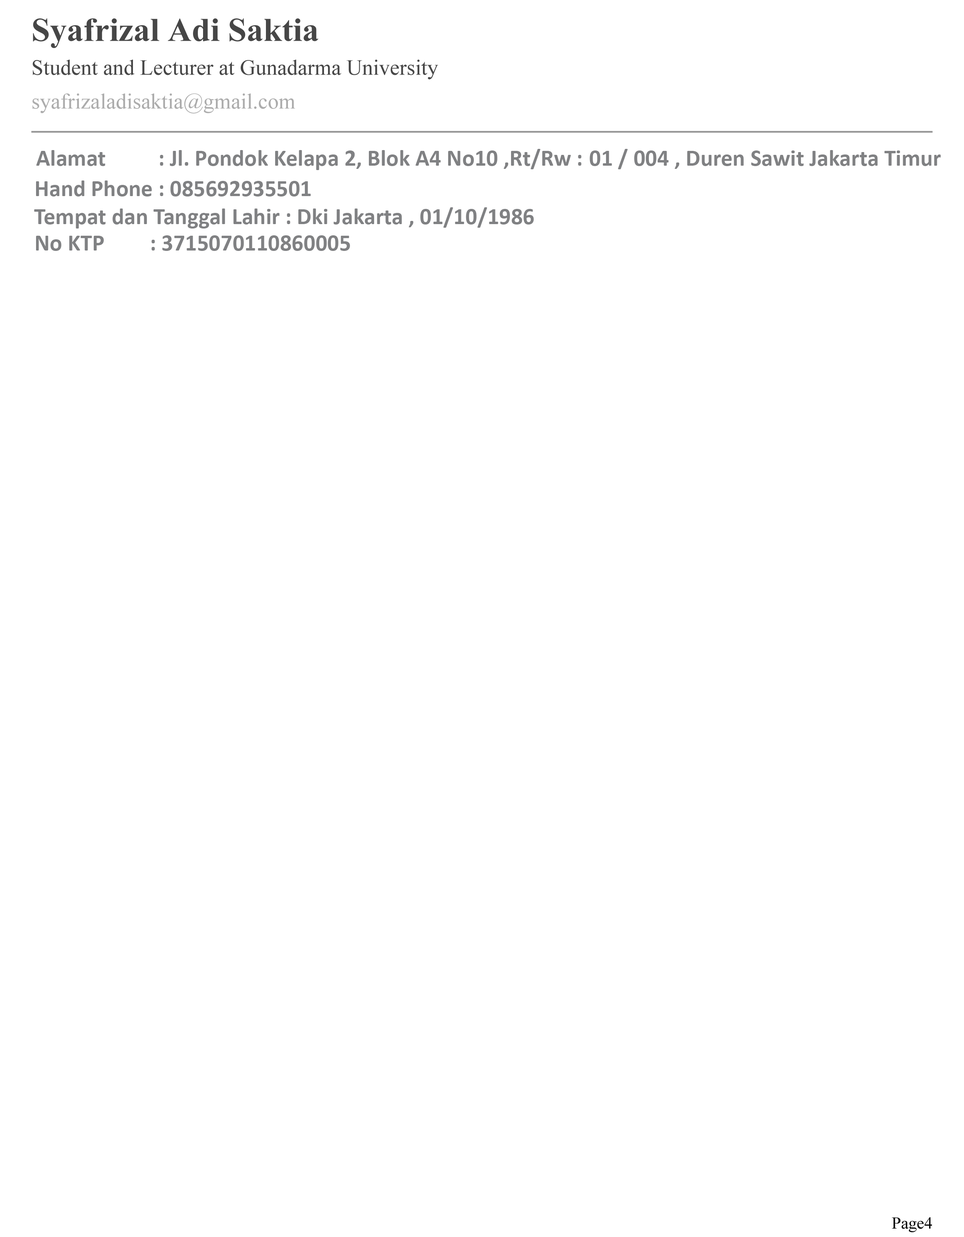
<style>
.page{position:relative;width:964px;height:1237px;background:#ffffff}
.page>*{position:absolute;margin:0}
.t1{font:23.4px "Calibri-Bold";color:#808183}
</style>
<div class="page">
<p class="t1" style="left:36px;top:149px;width:904px;height:21px">Alamat       : Jl. Pondok Kelapa 2, Blok A4 No10 ,Rt/Rw :  01 / 004 , Duren Sawit Jakarta Timur</p>
<p class="t1" style="left:36px;top:181px;width:275px;height:16px">Hand Phone : 085692935501</p>
<p class="t1" style="left:34px;top:207px;width:500px;height:22px">Tempat dan Tanggal Lahir : Dki Jakarta , 01/10/1986</p>
<p class="t1" style="left:36px;top:235px;width:314px;height:16px">No KTP    : 3715070110860005</p>
</div>
